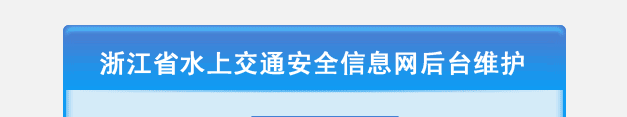
<style>
.page{position:relative;width:627px;height:117px;background:#f2f2f2}
.page>*{position:absolute;margin:0}
.t1{font:26px "SimHei";color:#ffffff;font-weight:bold}
</style>
<div class="page">
<p class="t1" style="left:100px;top:50px;width:424px;height:26px">浙江省水上交通安全信息网后台维护</p>
</div>
